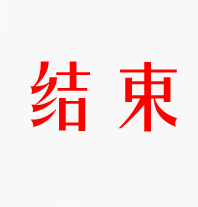
<style>
.page{position:relative;width:198px;height:207px;background:#f8f8f8}
.page>*{position:absolute;margin:0}
.t1{font:72px "FZYTK--GBK1-0";color:#ff0000;scale:1.2 1}
</style>
<div class="page">
<p class="t1" style="left:30px;top:61px;width:148px;height:71px">结束</p>
</div>
